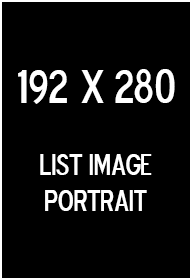
<style>
.page{position:relative;width:192px;height:280px;background:#000000}
.page>*{position:absolute;margin:0}
.t1{font:30px "BlueHighwayDType";color:#ffffff}
.t2{font:48px "BlueHighwayDType";color:#ffffff}
</style>
<div class="page">
<p class="t1" style="left:18px;top:69px;width:157px;height:142px;text-align:center"><span class="t2">192 x 280<br></span><br>LIST IMAGE<br>PORTRAIT</p>
</div>
